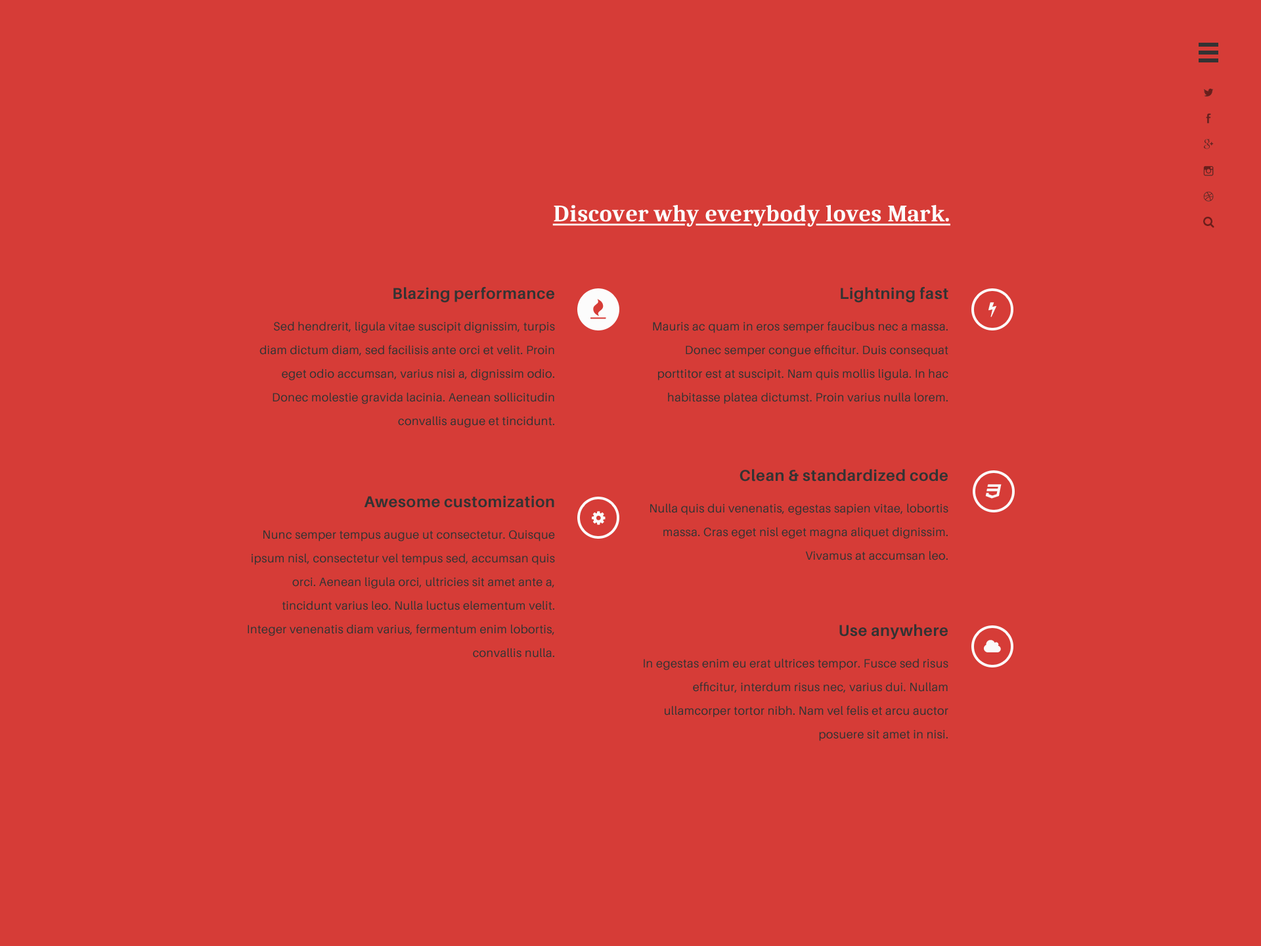
<style>
.page{position:relative;width:1261px;height:946px;background:#d63c37}
.page>*{position:absolute;margin:0}
.t1{font:23.6px "Caladea-Bold";color:#fcfcfc;text-decoration:underline}
.t2{font:23.6px "Caladea-Bold";color:#fcfcfc}
.t3{font:11.8px/23.6px "Aileron-Regular";letter-spacing:0.025em;color:#333333}
.t4{font:15.8px/23.6px "Aileron-Bold";letter-spacing:0.025em;color:#333333}
</style>
<div class="page">
<p class="t1" style="left:552px;top:205px;width:398px;height:22px">Discover wh <span class="t2">y </span>ever <span class="t2">y </span>bod <span class="t2">y </span>loves Mark.</p>
<p class="t3" style="left:259px;top:286px;width:296px;height:142px;text-align:right"><span class="t4">Blazing performance<br></span>Sed hendrerit, ligula vitae suscipit dignissim, turpis diam dictum diam, sed facilisis ante orci et velit. Proin eget odio accumsan, varius nisi a, dignissim odio. Donec molestie gravida lacinia. Aenean sollicitudin convallis augue et tincidunt.</p>
<p class="t3" style="left:653px;top:286px;width:295px;height:118px;text-align:right"><span class="t4">Lightning fast<br></span>Mauris ac quam in eros semper faucibus nec a massa. Donec semper congue efficitur. Duis consequat porttitor est at suscipit. Nam quis mollis ligula. In hac habitasse platea dictumst. Proin varius nulla lorem.</p>
<p class="t3" style="left:650px;top:469px;width:298px;height:91px;text-align:right"><span class="t4">Clean &amp; standardized code<br></span>Nulla quis dui venenatis, egestas sapien vitae, lobortis massa. Cras eget nisl eget magna aliquet dignissim. Vivamus at accumsan leo.</p>
<p class="t3" style="left:248px;top:495px;width:307px;height:162px;text-align:right"><span class="t4">Awesome customization<br></span>Nunc semper tempus augue ut consectetur. Quisque ipsum nisl, consectetur vel tempus sed, accumsan quis orci. Aenean ligula orci, ultricies sit amet ante a, tincidunt varius leo. Nulla luctus elementum velit. Integer venenatis diam varius, fermentum enim lobortis, convallis nulla.</p>
<p class="t3" style="left:644px;top:624px;width:304px;height:117px;text-align:right"><span class="t4">Use anywhere<br></span>In egestas enim eu erat ultrices tempor. Fusce sed risus efficitur, interdum risus nec, varius dui. Nullam ullamcorper tortor nibh. Nam vel felis et arcu auctor posuere sit amet in nisi.</p>
</div>
